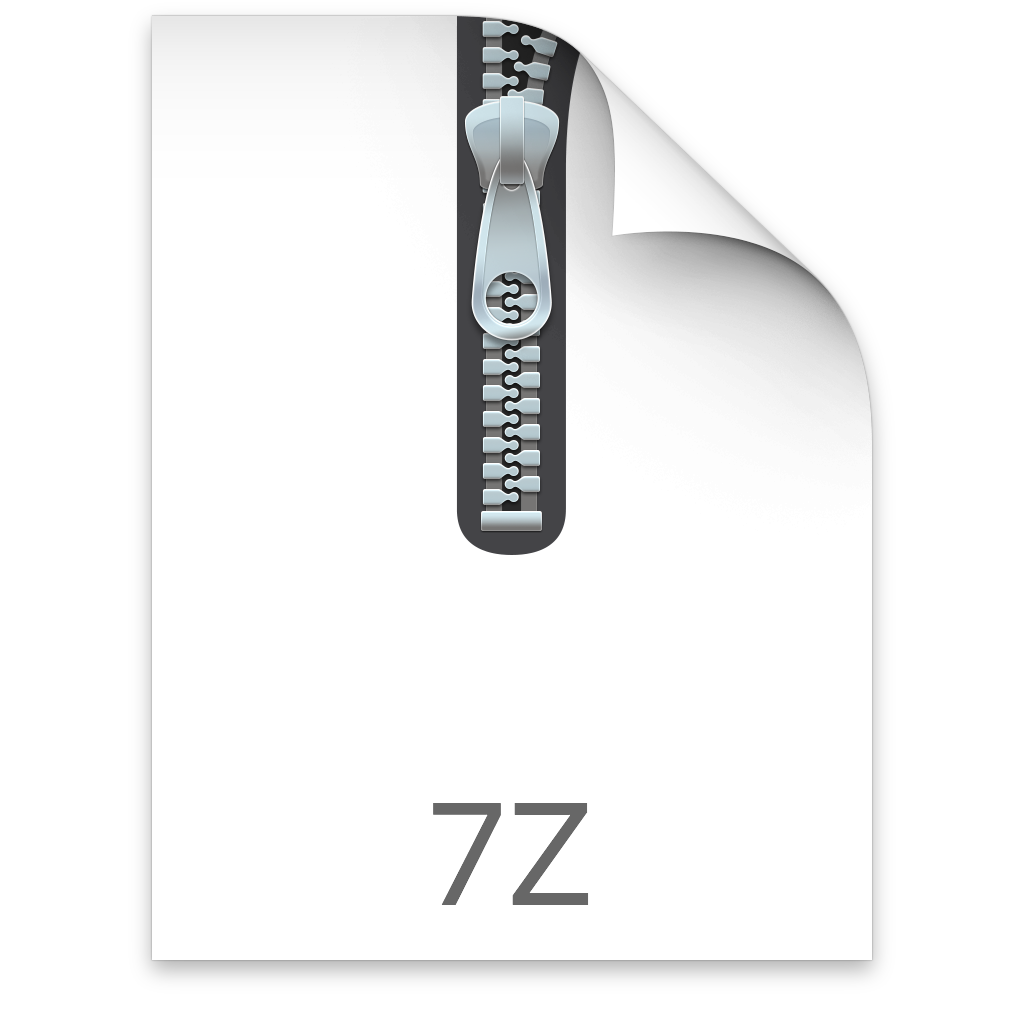
<style>
.page{position:relative;width:1024px;height:1024px;background:#ffffff}
.page>*{position:absolute;margin:0}
.t1{font:144px "SFProDisplay-Regular";color:#676767}
</style>
<div class="page">
<p class="t1" style="left:433px;top:803px;width:156px;height:102px">7Z</p>
</div>
